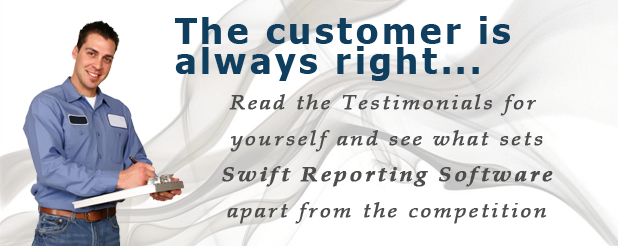
<style>
.page{position:relative;width:618px;height:246px;background:#ffffff}
.page>*{position:absolute;margin:0}
.t1{font:36px/30px "Tahoma-Bold";letter-spacing:0.1em;color:#103e5f}
.t2{font:20px/36px "BookAntiqua-Italic";letter-spacing:0.1em;color:#4d4d4d;font-weight:bold;scale:1.15 1}
.t3{font:20px/36px "BookAntiqua-BoldItalic";letter-spacing:0.1em;color:#4d4d4d;font-weight:bold;scale:1.15 1}
</style>
<div class="page">
<p class="t1" style="left:175px;top:16px;width:335px;height:65px">The customer is <br>always right...</p>
<p class="t2" style="left:222px;top:94px;width:331px;height:130px;text-align:center">Read the Testimonials for <br>yourself and see what sets<br><span class="t3">Swift Reporting Software<br></span>apart from the competition</p>
</div>
